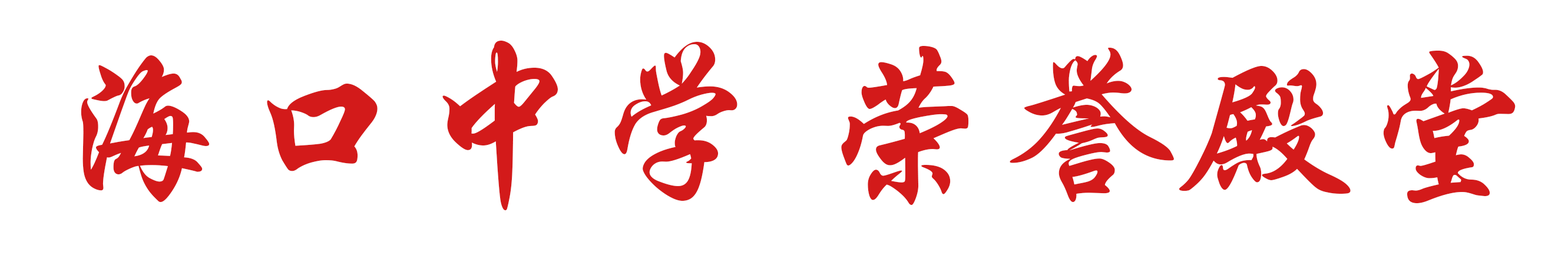
<style>
.page{position:relative;width:1568px;height:255px;background:#ffffff}
.page>*{position:absolute;margin:0}
.t1{font:171.8px "STXingkai-SC-Bold";color:#d31a1a;scale:1.05 1}
</style>
<div class="page">
<p class="t1" style="left:81px;top:41px;width:1435px;height:169px">海口中学 荣誉殿堂</p>
</div>
